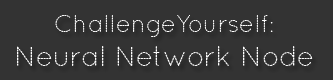
<style>
.page{position:relative;width:333px;height:80px;background:#333333}
.page>*{position:absolute;margin:0}
.t1{font:28px "QuicksandDash-Regular";color:#ffffff}
.t2{font:24px "QuicksandDash-Regular";color:#ffffff}
</style>
<div class="page">
<p class="t1" style="left:17px;top:15px;width:296px;height:51px;text-align:center"><span class="t2">ChallengeYourself:<br></span>Neural Network Node</p>
</div>
